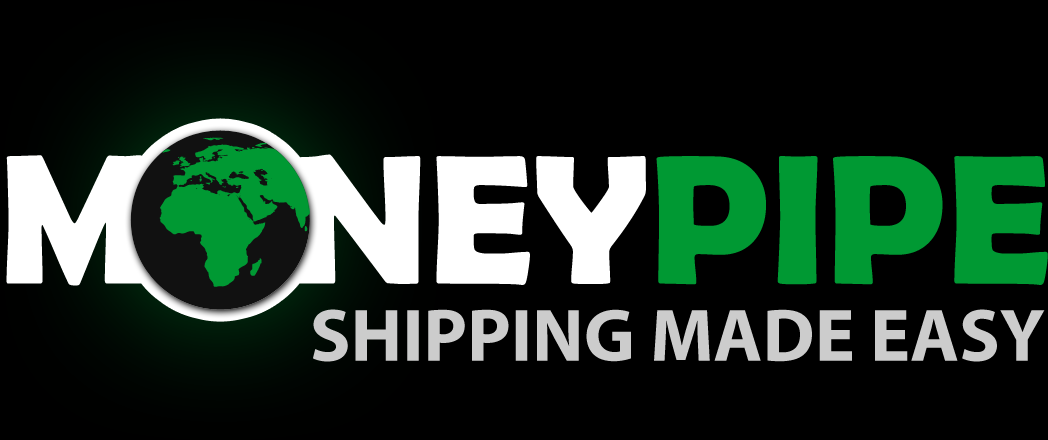
<style>
.page{position:relative;width:1048px;height:440px;background:#000000}
.page>*{position:absolute;margin:0}
.t1{font:185.8px "BerlinSansFBDemi-Bold";color:#ffffff;text-transform:uppercase}
.t2{font:185.8px "BerlinSansFBDemi-Bold";color:#009933;text-transform:uppercase}
.t3{font:75px "MyriadPro-Bold";color:#cccccc;text-transform:uppercase}
</style>
<div class="page">
<p class="t1" style="left:6px;top:152px;width:1042px;height:135px">Money<span class="t2">Pipe</span></p>
<p class="t3" style="left:313px;top:309px;width:732px;height:53px">Shipping made easy</p>
</div>
